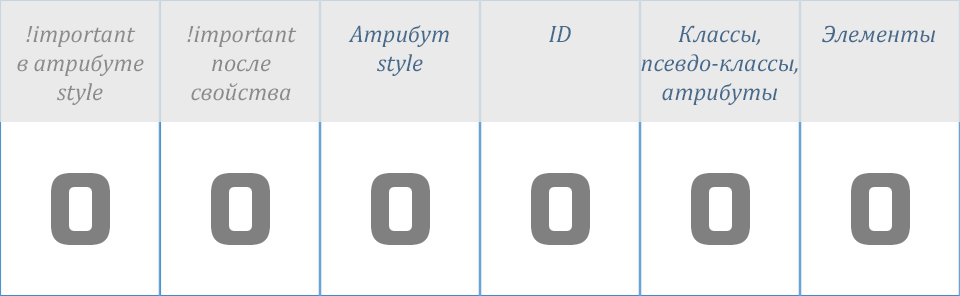
<style>
.page{position:relative;width:960px;height:296px;background:#ffffff}
.page>*{position:absolute;margin:0}
.t1{font:24px "Cambria-Italic";color:#8b8b8b}
.t2{font:24px "Cambria-Italic";color:#8a8a8b}
.t3{font:24px "Cambria-Italic";color:#456a8b}
.t4{font:100px "RussoOne-Regular";color:#808080}
</style>
<div class="page">
<p class="t1" style="left:17px;top:26px;width:127px;height:79px;text-align:center">!important<br>в атрибуте<br>style</p>
<p class="t2" style="left:187px;top:26px;width:110px;height:75px;text-align:center">!important<br>после свойства</p>
<p class="t3" style="left:348px;top:25px;width:101px;height:51px;text-align:center">Атрибут<br>style</p>
<p class="t3" style="left:549px;top:26px;width:22px;height:16px">ID</p>
<p class="t3" style="left:641px;top:25px;width:157px;height:80px;text-align:center">Классы,<br>псевдо-классы,<br>атрибуты</p>
<p class="t3" style="left:822px;top:25px;width:114px;height:18px">Элементы</p>
<p class="t4" style="left:51px;top:173px;width:59px;height:72px">0</p>
<p class="t4" style="left:211px;top:173px;width:59px;height:72px">0</p>
<p class="t4" style="left:371px;top:173px;width:59px;height:72px">0</p>
<p class="t4" style="left:531px;top:173px;width:59px;height:72px">0</p>
<p class="t4" style="left:691px;top:173px;width:59px;height:72px">0</p>
<p class="t4" style="left:851px;top:173px;width:59px;height:72px">0</p>
</div>
